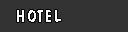
<style>
.page{position:relative;width:128px;height:32px;background:#333333}
.page>*{position:absolute;margin:0}
.t1{font:17.2px "DomCasualBT-Regular";letter-spacing:0.05em;color:#ffffff;scale:1.05 1}
</style>
<div class="page">
<p class="t1" style="left:17px;top:10px;width:44px;height:12px">HOTEL</p>
</div>
